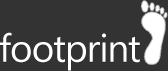
<style>
.page{position:relative;width:168px;height:71px;background:#333333}
.page>*{position:absolute;margin:0}
.t1{font:38.6px "Gadugi";letter-spacing:-0.01em;color:#ffffff}
</style>
<div class="page">
<p class="t1" style="left:0px;top:32px;width:140px;height:39px">footprint</p>
</div>
